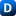
<style>
.page{position:relative;width:16px;height:16px}
.page>*{position:absolute;margin:0}
.t1{font:12.5px "Roboto-Bold";color:#ffffff;scale:1.08 1}
</style>
<div class="page">
<p class="t1" style="left:4px;top:3px;width:8px;height:10px">D</p>
</div>
